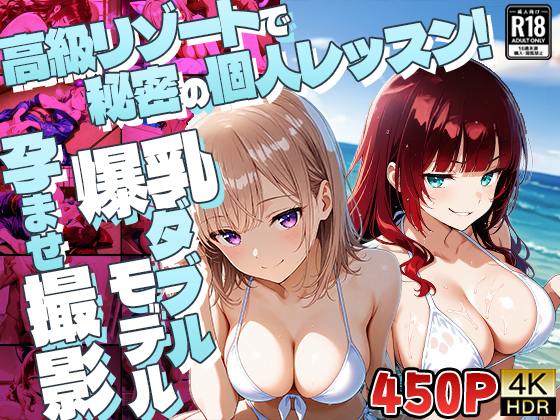
<style>
.page{position:relative;width:560px;height:420px}
.page>*{position:absolute;margin:0}
.t1{font:62.4px "DelaGothicOne-Regular";color:#b5f1fc;scale:0.77 1}
.t2{font:39px "DelaGothicOne-Regular";color:#ffffff;scale:0.77 1}
.t3{font:62.4px "DelaGothicOne-Regular";color:#b3f0fb;scale:0.77 1}
.t4{font:62.4px "DelaGothicOne-Regular";color:#b6f1fc;scale:0.77 1}
.t5{font:37.1px "DelaGothicOne-Regular";color:#bdf2fc;scale:1.3 1}
.t6{font:59.4px "DelaGothicOne-Regular";color:#bdf2fc;scale:1.3 1}
.t7{font:93.6px "DelaGothicOne-Regular";color:#ffffff;scale:0.77 1}
.t8{font:48px "DelaGothicOne-Regular";color:#b6f1fc;scale:1.3 1}
.t9{font:48px "DelaGothicOne-Regular";color:#ffffff;scale:1.3 1}
.t10{font:52px "RiiCookieTest-R";font-weight:bold}
</style>
<div class="page">
<p class="t1" style="left:0px;top:0px;width:261px;height:86px;rotate:-10deg">高級リゾート</p>
<p class="t2" style="left:259px;top:5px;width:31px;height:31px;rotate:-10deg">で</p>
<p class="t3" style="left:205px;top:7px;width:287px;height:98px;rotate:-10deg">個人レッスン！</p>
<p class="t4" style="left:84px;top:64px;width:97px;height:61px;rotate:-10deg">秘密</p>
<p class="t2" style="left:181px;top:78px;width:29px;height:30px;rotate:-10deg">の</p>
<p class="t5" style="left:0px;top:131px;width:63px;height:140px;rotate:-10deg"><span class="t6">孕</span>ませ</p>
<p class="t7" style="left:71px;top:130px;width:147px;height:95px;rotate:-10deg">爆乳</p>
<p class="t8" style="left:145px;top:197px;width:70px;height:171px;rotate:-10deg">ダブル</p>
<p class="t9" style="left:109px;top:258px;width:68px;height:160px;rotate:-10deg">モデル</p>
<p class="t10" style="left:372px;top:372px;width:124px;height:42px">450P</p>
</div>
